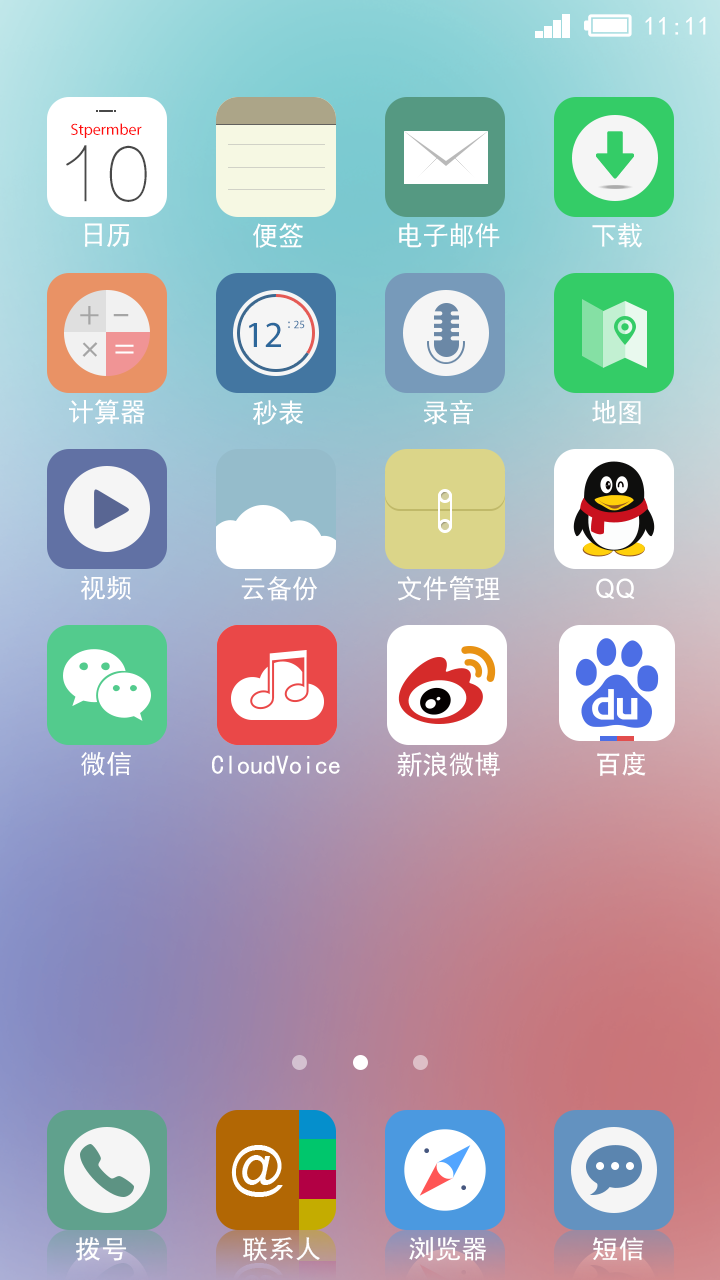
<style>
.page{position:relative;width:720px;height:1280px}
.page>*{position:absolute;margin:0}
.t1{font:26px "SimHei";letter-spacing:0.02em;color:#ffffff}
.t2{font:16px "MyriadPro-Regular";color:#ff0d0d}
.t3{font:72px "FZLTCXHJW--GB1-0";color:#494949;font-weight:bold}
.t4{font:26.5px "SimHei";color:#ffffff}
.t5{font:35px "MyriadPro-Regular";color:#a5a5a5}
.t6{font:35px "MyriadPro-Regular";color:#a5a5a5;scale:1.69 1}
.t7{font:37px "MyriadPro-Regular";color:#2d679a}
.t8{font:14.1px "SimSun";scale:0.83 1}
.t9{font:11.2px "MyriadPro-Regular"}
.t10{font:35px "MyriadPro-Regular";color:#ffffff}
.t11{font:26.5px "ArialMT";color:#ffffff}
.t12{font:26.5px "AdobeHeitiStd-Regular";color:#ffffff}
.t13{font:25.5px "SimHei";letter-spacing:0.02em;color:#ffffff}
</style>
<div class="page">
<p class="t1" style="left:645px;top:16px;width:61px;height:19px">11:11</p>
<p class="t2" style="left:71px;top:123px;width:71px;height:15px">Stpermber</p>
<p class="t3" style="left:66px;top:145px;width:81px;height:57px">10</p>
<p class="t4" style="left:85px;top:223px;width:44px;height:24px">日历</p>
<p class="t4" style="left:253px;top:223px;width:50px;height:25px">便签</p>
<p class="t4" style="left:399px;top:223px;width:101px;height:25px">电子邮件</p>
<p class="t4" style="left:592px;top:223px;width:50px;height:25px">下载</p>
<p class="t5" style="left:80px;top:306px;width:19px;height:19px">+</p>
<p class="t6" style="left:113px;top:314px;width:16px;height:3px">-</p>
<p class="t7" style="left:249px;top:322px;width:32px;height:25px">12</p>
<p class="t8" style="left:288px;top:321px;width:2px;height:7px">:</p>
<p class="t9" style="left:294px;top:320px;width:11px;height:9px">25</p>
<p class="t5" style="left:82px;top:342px;width:16px;height:15px;rotate:45deg">+</p>
<p class="t10" style="left:115px;top:344px;width:19px;height:10px">=</p>
<p class="t4" style="left:69px;top:399px;width:76px;height:25px">计算器</p>
<p class="t4" style="left:253px;top:400px;width:50px;height:25px">秒表</p>
<p class="t4" style="left:423px;top:400px;width:50px;height:25px">录音</p>
<p class="t4" style="left:592px;top:400px;width:49px;height:25px">地图</p>
<p class="t4" style="left:81px;top:575px;width:50px;height:25px">视频</p>
<p class="t4" style="left:241px;top:576px;width:77px;height:25px">云备份</p>
<p class="t4" style="left:398px;top:575px;width:102px;height:26px">文件管理</p>
<p class="t11" style="left:596px;top:578px;width:39px;height:22px">QQ</p>
<p class="t4" style="left:81px;top:751px;width:50px;height:25px">微信</p>
<p class="t4" style="left:212px;top:755px;width:128px;height:19px">CloudVoice</p>
<p class="t4" style="left:397px;top:752px;width:103px;height:25px">新浪微博</p>
<p class="t12" style="left:597px;top:751px;width:49px;height:25px">百度</p>
<p class="t13" style="left:76px;top:1237px;width:51px;height:24px">拨号</p>
<p class="t13" style="left:243px;top:1237px;width:77px;height:24px">联系人</p>
<p class="t13" style="left:409px;top:1236px;width:78px;height:25px">浏览器</p>
<p class="t13" style="left:593px;top:1237px;width:51px;height:24px">短信</p>
</div>
